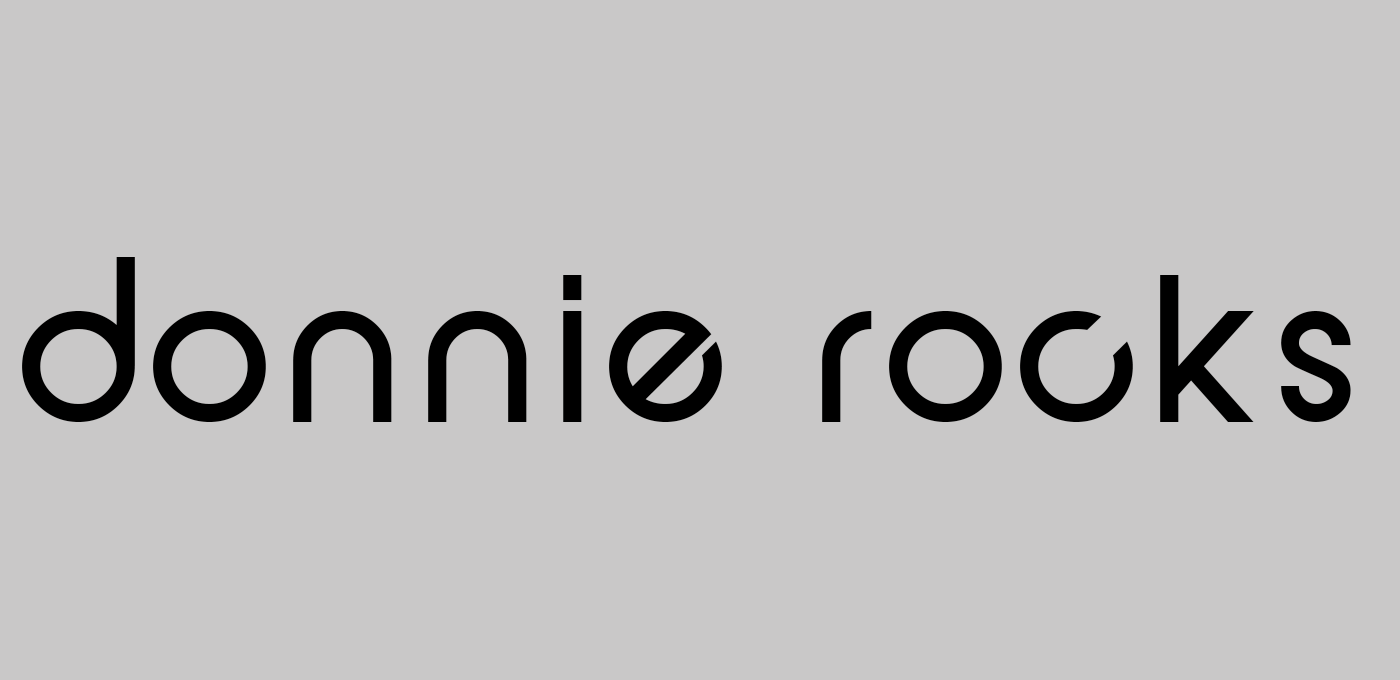
<style>
.page{position:relative;width:1400px;height:680px;background:#c9c8c8}
.page>*{position:absolute;margin:0}
.t1{font:200px "SFNewRepublic";color:#000000}
</style>
<div class="page">
<p class="t1" style="left:22px;top:257px;width:1329px;height:165px">donnie rocks</p>
</div>
